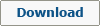
<style>
.page{position:relative;width:100px;height:26px;background:#f8f8f8}
.page>*{position:absolute;margin:0}
.t1{font:12px "Verdana-Bold";color:#0d5387}
</style>
<div class="page">
<p class="t1" style="left:17px;top:7px;width:66px;height:10px">Download</p>
</div>
